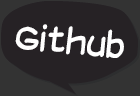
<style>
.page{position:relative;width:140px;height:96px;background:#262225}
.page>*{position:absolute;margin:0}
.t1{font:37px "SuplexmentaryComicNC";color:#ffffff}
</style>
<div class="page">
<p class="t1" style="left:15px;top:24px;width:109px;height:34px;rotate:5deg">Github</p>
</div>
